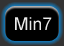
<style>
.page{position:relative;width:64px;height:46px;background:#000000}
.page>*{position:absolute;margin:0}
.t1{font:17.8px "ArialMT";color:#ebebeb}
</style>
<div class="page">
<p class="t1" style="left:15px;top:17px;width:37px;height:13px">Min7</p>
</div>
